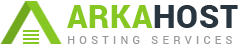
<style>
.page{position:relative;width:250px;height:45px;background:#ffffff}
.page>*{position:absolute;margin:0}
.t1{font:32px "Roboto-Black";letter-spacing:0.025em;color:#86c724;text-transform:uppercase}
.t2{font:32px "Roboto-Black";letter-spacing:0.025em;color:#2a363f;text-transform:uppercase}
.t3{font:11px "Roboto-Regular";letter-spacing:0.39em;color:#999999;text-transform:uppercase}
</style>
<div class="page">
<p class="t1" style="left:67px;top:5px;width:171px;height:23px">arka<span class="t2">Host</span></p>
<p class="t3" style="left:68px;top:36px;width:164px;height:8px">hosting services</p>
</div>
